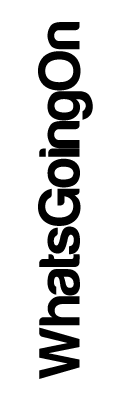
<style>
.page{position:relative;width:120px;height:400px;background:#ffffff}
.page>*{position:absolute;margin:0}
.t1{font:60px "Harabara-Bold";color:#000000}
</style>
<div class="page">
<p class="t1" style="left:38px;top:22px;width:55px;height:357px;rotate:-90deg">WhatsGoingOn</p>
</div>
